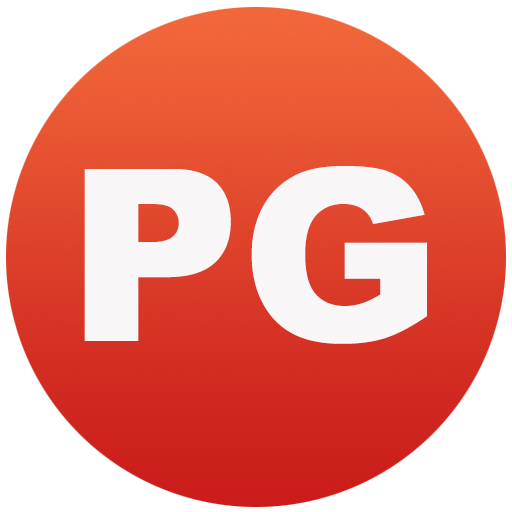
<style>
.page{position:relative;width:512px;height:512px;background:#ffffff}
.page>*{position:absolute;margin:0}
.t1{font:240px "Arial-Black";color:#f8f6f6}
</style>
<div class="page">
<p class="t1" style="left:84px;top:166px;width:343px;height:178px">PG</p>
</div>
